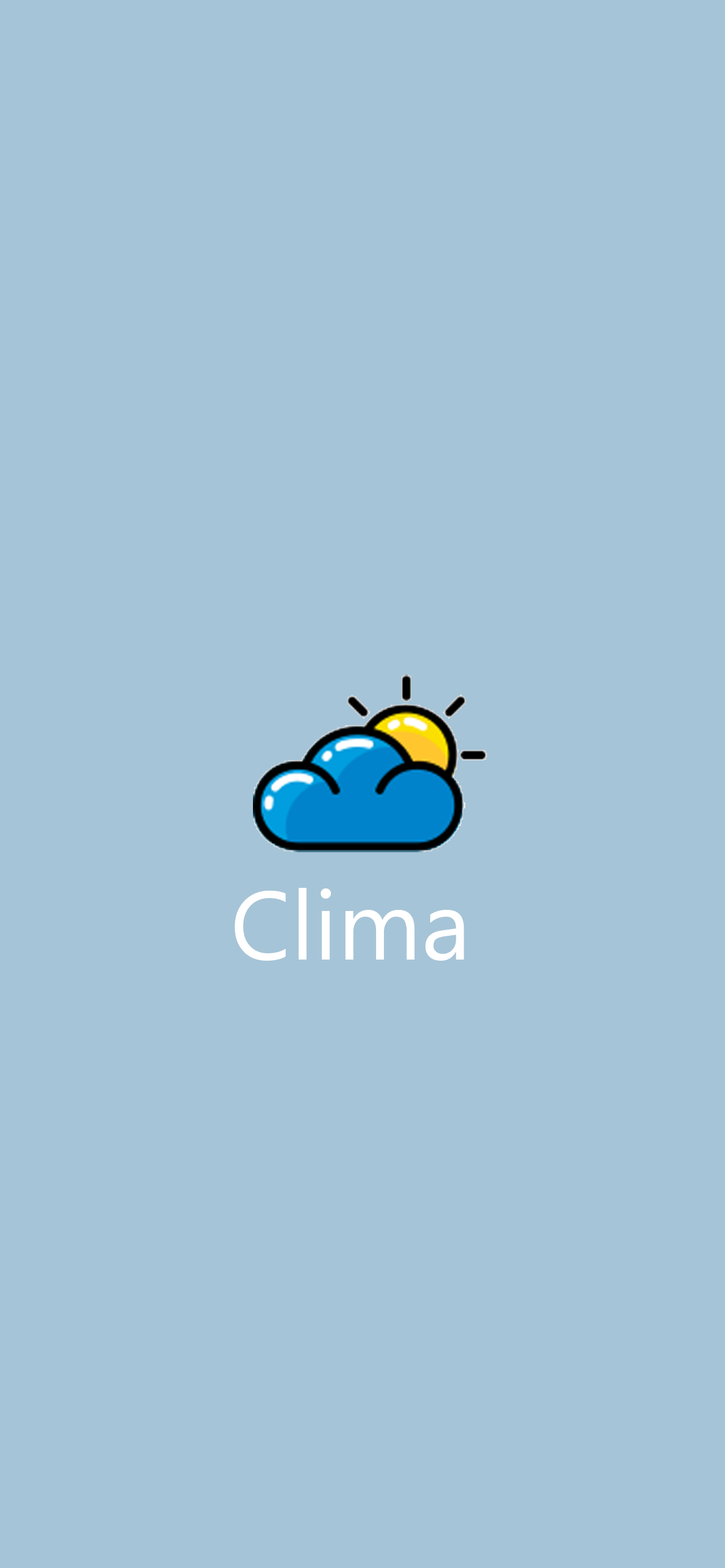
<style>
.page{position:relative;width:725px;height:1568px;background:#a6c4d7}
.page>*{position:absolute;margin:0}
.t1{font:97.1px "MicrosoftTaiLe";color:#ffffff}
</style>
<div class="page">
<p class="t1" style="left:234px;top:888px;width:230px;height:73px">Clima</p>
</div>
